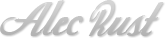
<style>
.page{position:relative;width:166px;height:38px;background:#ffffff}
.page>*{position:absolute;margin:0}
.t1{font:72px "Today";letter-spacing:-0.01em;color:#cfcfcf}
</style>
<div class="page">
<p class="t1" style="left:0px;top:0px;width:164px;height:36px">Alec Rust</p>
</div>
